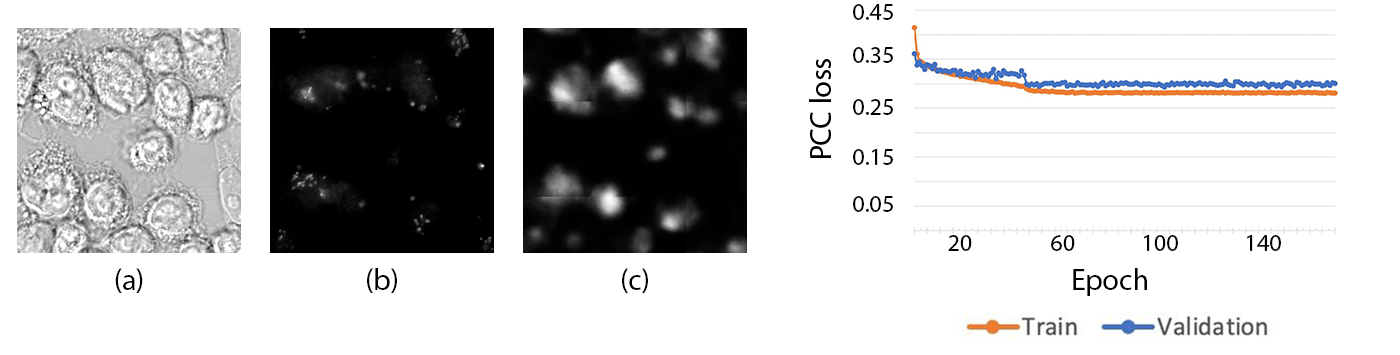
<style>
.page{position:relative;width:1400px;height:355px;background:#ffffff}
.page>*{position:absolute;margin:0}
.t1{font:24px "MyriadPro-Regular";color:#000000}
.t2{font:30px "MyriadPro-Regular";color:#000000}
</style>
<div class="page">
<p class="t1" style="left:853px;top:4px;width:40px;height:16px">0.45</p>
<p class="t1" style="left:853px;top:47px;width:40px;height:16px">0.35</p>
<p class="t1" style="left:853px;top:99px;width:40px;height:16px">0.25</p>
<p class="t1" style="left:853px;top:149px;width:40px;height:16px">0.15</p>
<p class="t1" style="left:853px;top:196px;width:40px;height:16px">0.05</p>
<p class="t1" style="left:948px;top:235px;width:24px;height:16px">20</p>
<p class="t1" style="left:1051px;top:235px;width:24px;height:16px">60</p>
<p class="t1" style="left:1144px;top:235px;width:34px;height:16px">100</p>
<p class="t1" style="left:1247px;top:235px;width:34px;height:16px">140</p>
<p class="t2" style="left:115px;top:268px;width:28px;height:25px">(a)</p>
<p class="t2" style="left:367px;top:268px;width:30px;height:25px">(b)</p>
<p class="t2" style="left:622px;top:268px;width:26px;height:25px">(c)</p>
<p class="t2" style="left:1073px;top:268px;width:74px;height:28px">Epoch</p>
</div>
